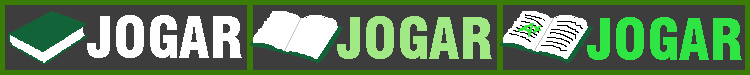
<style>
.page{position:relative;width:750px;height:75px;background:#3d3d3d}
.page>*{position:absolute;margin:0}
.t1{font:56px "Swiss721BT-BlackCondensed";color:#fffefe}
.t2{font:56px "Swiss721BT-BlackCondensed";color:#a1e984}
.t3{font:56px "Swiss721BT-BlackCondensed";color:#2ee543}
</style>
<div class="page">
<p class="t1" style="left:87px;top:15px;width:155px;height:43px">JOGAR</p>
<p class="t2" style="left:337px;top:16px;width:155px;height:43px">JOGAR</p>
<p class="t3" style="left:587px;top:17px;width:155px;height:43px">JOGAR</p>
</div>
